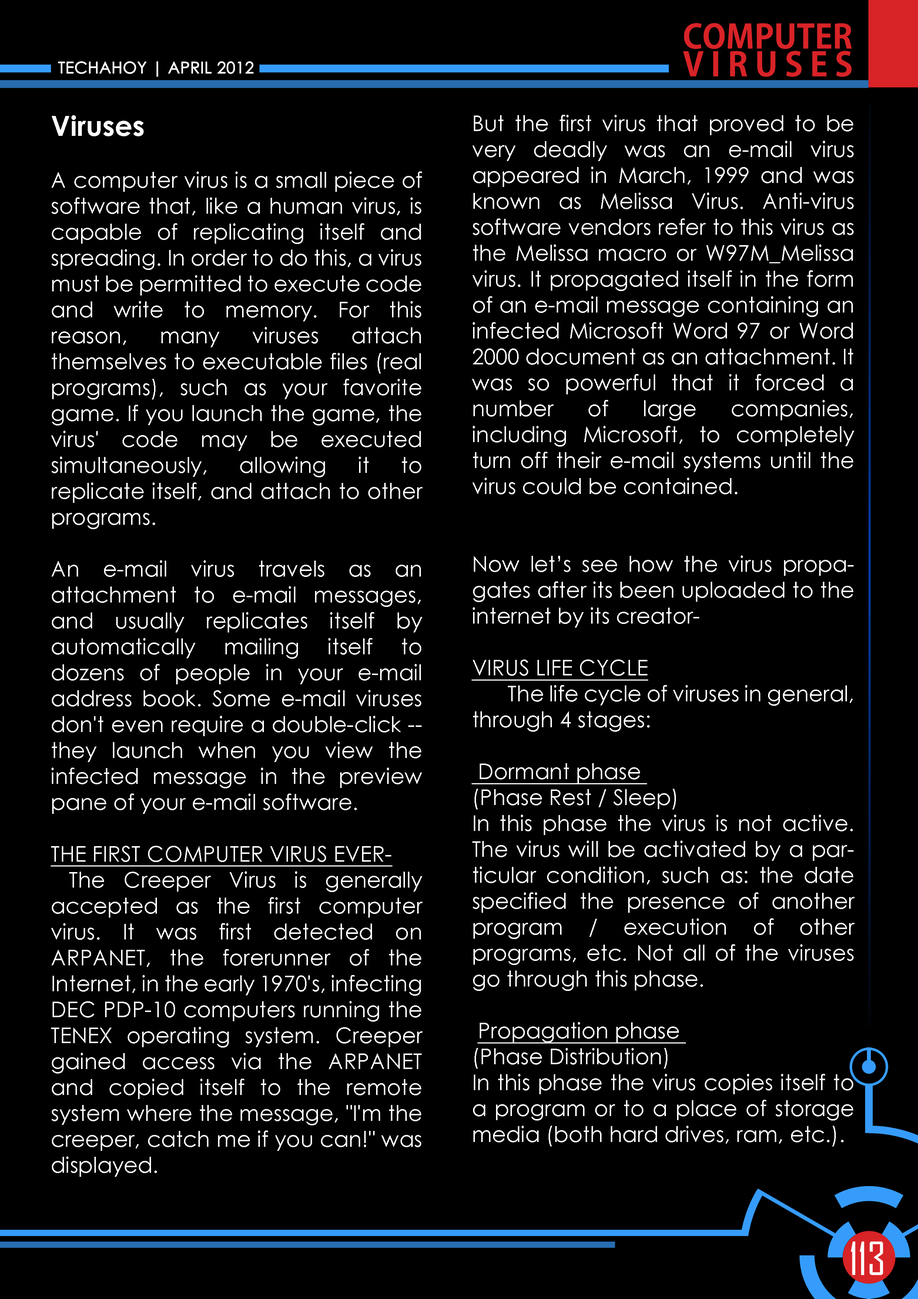
<style>
.page{position:relative;width:918px;height:1299px;background:#000000}
.page>*{position:absolute;margin:0}
.t1{font:32.6px/27.8px "AdobeGothicStd-Bold";color:#d82327;text-transform:uppercase}
.t2{font:32.6px/27.8px "AdobeGothicStd-Bold";letter-spacing:0.22em;color:#d82327;text-transform:uppercase}
.t3{font:16px "CenturyGothic";color:#ffffff;text-transform:uppercase;font-weight:bold}
.t4{font:21.6px "CenturyGothic";color:#ffffff}
.t5{font:27.8px "CenturyGothic-Bold";color:#ffffff}
.t6{font:21.6px "CenturyGothic";color:#ffffff;text-decoration:underline}
.t7{font:43.7px "AgencyFB-Reg";color:#ffffff;text-transform:uppercase}
</style>
<div class="page">
<p class="t1" style="left:683px;top:23px;width:169px;height:54px">Computer <br><span class="t2">Viruses</span></p>
<p class="t3" style="left:58px;top:61px;width:196px;height:16px">techahoy | APRIL 2012</p>
<p class="t4" style="left:51px;top:115px;width:372px;height:1062px;text-align:justify"><span class="t5">Viruses<br></span><br>A computer virus is a small piece of software that, like a human virus, is capable of replicating itself and spreading. In order to do this, a virus must be permitted to execute code and write to memory. For this reason, many viruses attach themselves to executable files (real programs), such as your favorite game. If you launch the game, the virus' code may be executed simultaneously, allowing it to replicate itself, and attach to other programs.<br><br>An e-mail virus travels as an attachment to e-mail messages, and usually replicates itself by automatically mailing itself to dozens of people in your e-mail address book. Some e-mail viruses don't even require a double-click -- they launch when you view the infected message in the preview pane of your e-mail software.<br><br><span class="t6">THE FIRST COMPUTER VIRUS EVER-<br></span> The Creeper Virus is generally accepted as the first computer virus. It was first detected on ARPANET, the forerunner of the Internet, in the early 1970's, infecting DEC PDP-10 computers running the TENEX operating system. Creeper gained access via the ARPANET and copied itself to the remote system where the message, "I'm the creeper, catch me if you can!" was displayed.</p>
<p class="t4" style="left:472px;top:115px;width:383px;height:1031px;text-align:justify">But the first virus that proved to be very deadly was an e-mail virus appeared in March, 1999 and was known as Melissa Virus. Anti-virus software vendors refer to this virus as the Melissa macro or W97M_Melissa virus. It propagated itself in the form of an e-mail message containing an infected Microsoft Word 97 or Word 2000 document as an attachment. It was so powerful that it forced a number of large companies, including Microsoft, to completely turn off their e-mail systems until the virus could be contained.<br><br><br>Now let’s see how the virus propagates after its been uploaded to the internet by its creator-<br><br><span class="t6">VIRUS LIFE CYCLE<br></span>       The life cycle of viruses in general, through 4 stages:<br><br><span class="t6"> Dormant phase <br></span>(Phase Rest / Sleep)<br>In this phase the virus is not active. The virus will be activated by a particular condition, such as: the date specified the presence of another program / execution of other programs, etc. Not all of the viruses go through this phase.<br><br> <span class="t6">Propagation phase <br></span>(Phase Distribution)<br>In this phase the virus copies itself to a program or to a place of storage media (both hard drives, ram, etc.).</p>
<p class="t7" style="left:851px;top:1241px;width:32px;height:34px">113</p>
</div>
